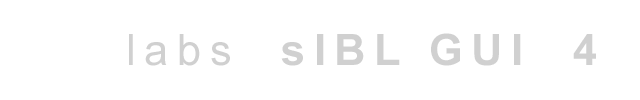
<style>
.page{position:relative;width:640px;height:100px;background:#ffffff}
.page>*{position:absolute;margin:0}
.t1{font:43.2px "Arial-BoldMT";letter-spacing:0.2em;color:#c0c0c0}
.t2{font:43.2px "ArialMT";letter-spacing:0.2em;color:#c0c0c0}
</style>
<div class="page">
<p class="t1" style="left:41px;top:33px;width:555px;height:33px;opacity:0.75"><span class="t2">hdrlabs  </span>sIBL GUI  4</p>
</div>
